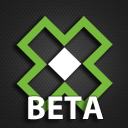
<style>
.page{position:relative;width:128px;height:128px}
.page>*{position:absolute;margin:0}
.t1{font:33.3px "MyriadPro-Bold";color:#ffffff}
</style>
<div class="page">
<p class="t1" style="left:28px;top:96px;width:76px;height:24px">BETA</p>
</div>
